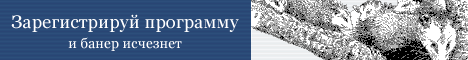
<style>
.page{position:relative;width:468px;height:60px}
.page>*{position:absolute;margin:0}
.t1{font:18px/10px "Georgia";letter-spacing:0.01em;color:#ffffff}
.t2{font:14px/10px "Georgia";letter-spacing:0.01em;color:#ffffff}
</style>
<div class="page">
<p class="t1" style="left:11px;top:14px;width:228px;height:37px;text-align:center">Зарегистрируй программу<br><br><span class="t2">и банер исчезнет</span></p>
</div>
